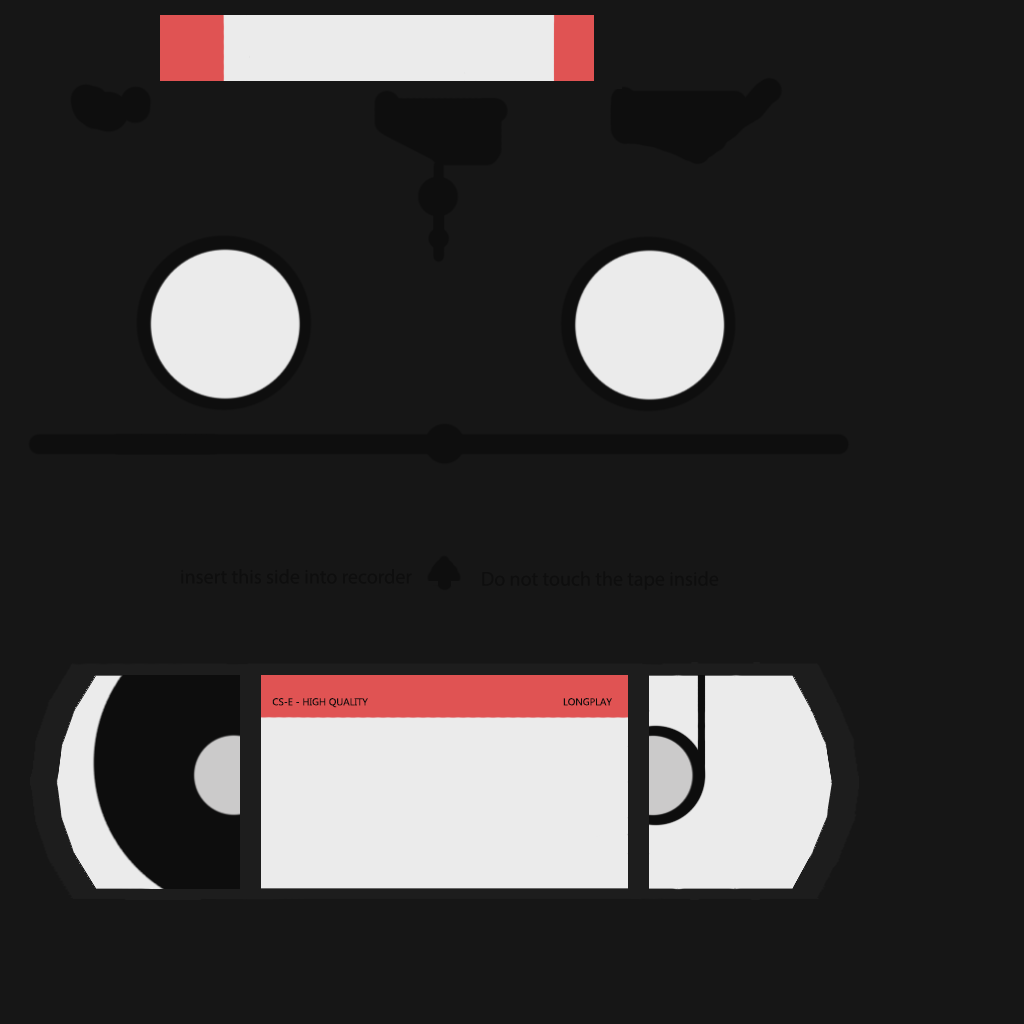
<style>
.page{position:relative;width:1024px;height:1024px;background:#161616}
.page>*{position:absolute;margin:0}
.t1{font:20px "MyriadPro-Regular";color:#0e0e0e}
.t2{font:10px "MicrosoftTaiLe";color:#0e0e0e}
</style>
<div class="page">
<p class="t1" style="left:181px;top:569px;width:231px;height:15px">insert this side into recorder</p>
<p class="t1" style="left:482px;top:571px;width:237px;height:19px">Do not touch the tape inside</p>
<p class="t2" style="left:272px;top:698px;width:340px;height:10px">CS-E - HIGH QUALITY       LONGPLAY</p>
</div>
